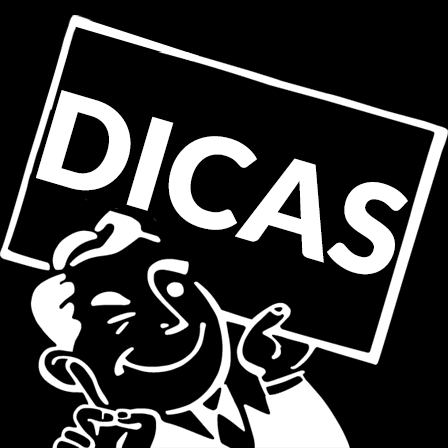
<style>
.page{position:relative;width:448px;height:448px;background:#000000}
.page>*{position:absolute;margin:0}
.t1{font:125px "Lato-Black";color:#ffffff}
</style>
<div class="page">
<p class="t1" style="left:36px;top:90px;width:372px;height:185px;rotate:16deg">DICAS</p>
</div>
